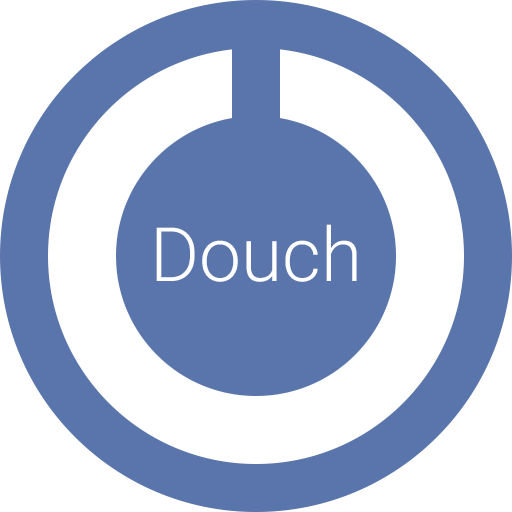
<style>
.page{position:relative;width:512px;height:512px;background:#5a75ab}
.page>*{position:absolute;margin:0}
.t1{font:75px "Roboto-Light";color:#ffffff}
</style>
<div class="page">
<p class="t1" style="left:156px;top:224px;width:201px;height:58px">Douch</p>
</div>
